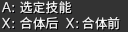
<style>
.page{position:relative;width:128px;height:32px;background:#333333}
.page>*{position:absolute;margin:0}
.t1{font:13px/16px "SourceHanSansSC-Regular";color:#e7e7e7}
</style>
<div class="page">
<p class="t1" style="left:20px;top:1px;width:100px;height:29px">选定技能<br>合体后        合体前</p>
</div>
